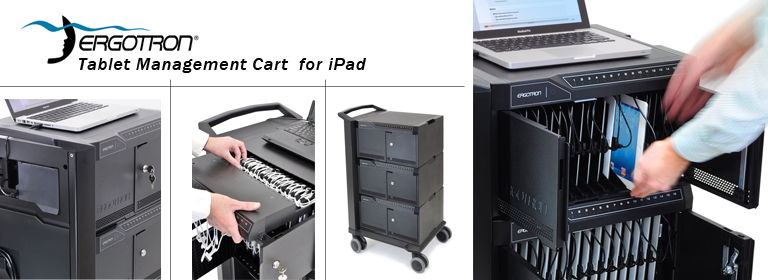
<style>
.page{position:relative;width:768px;height:280px;background:#ffffff}
.page>*{position:absolute;margin:0}
.t1{font:18px "FranklinGothic-MediumItalic";letter-spacing:0.05em;color:#000000}
</style>
<div class="page">
<p class="t1" style="left:79px;top:58px;width:287px;height:15px">Tablet Management Cart  for iPad</p>
</div>
